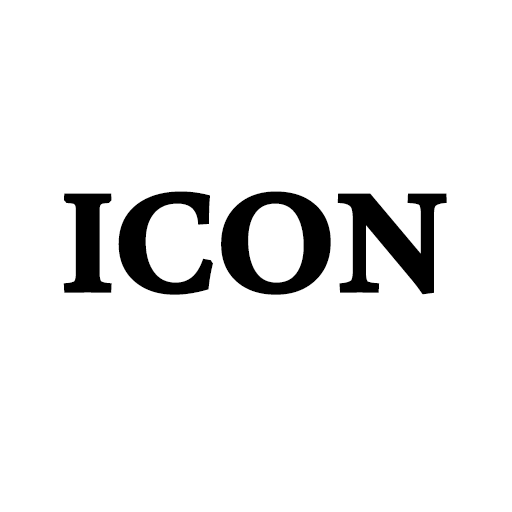
<style>
.page{position:relative;width:512px;height:512px;background:#ffffff}
.page>*{position:absolute;margin:0}
.t1{font:200px "MicrosoftUighur-Bold";color:#000000;font-weight:bold}
</style>
<div class="page">
<p class="t1" style="left:63px;top:191px;width:384px;height:104px">ICON</p>
</div>
